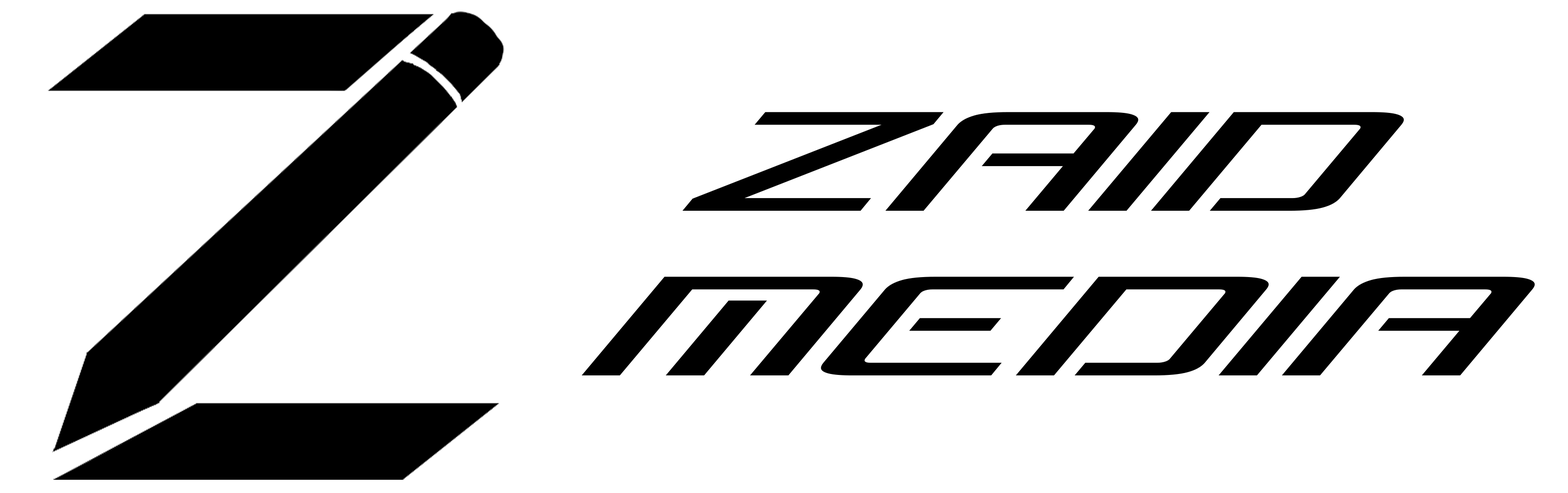
<style>
.page{position:relative;width:1568px;height:493px;background:#ffffff}
.page>*{position:absolute;margin:0}
.t1{font:183.1px/164.8px "ConcielianBreakExpandedItalic";color:#000000}
</style>
<div class="page">
<p class="t1" style="left:582px;top:112px;width:953px;height:264px">ZAID <br>MEDIA</p>
</div>
